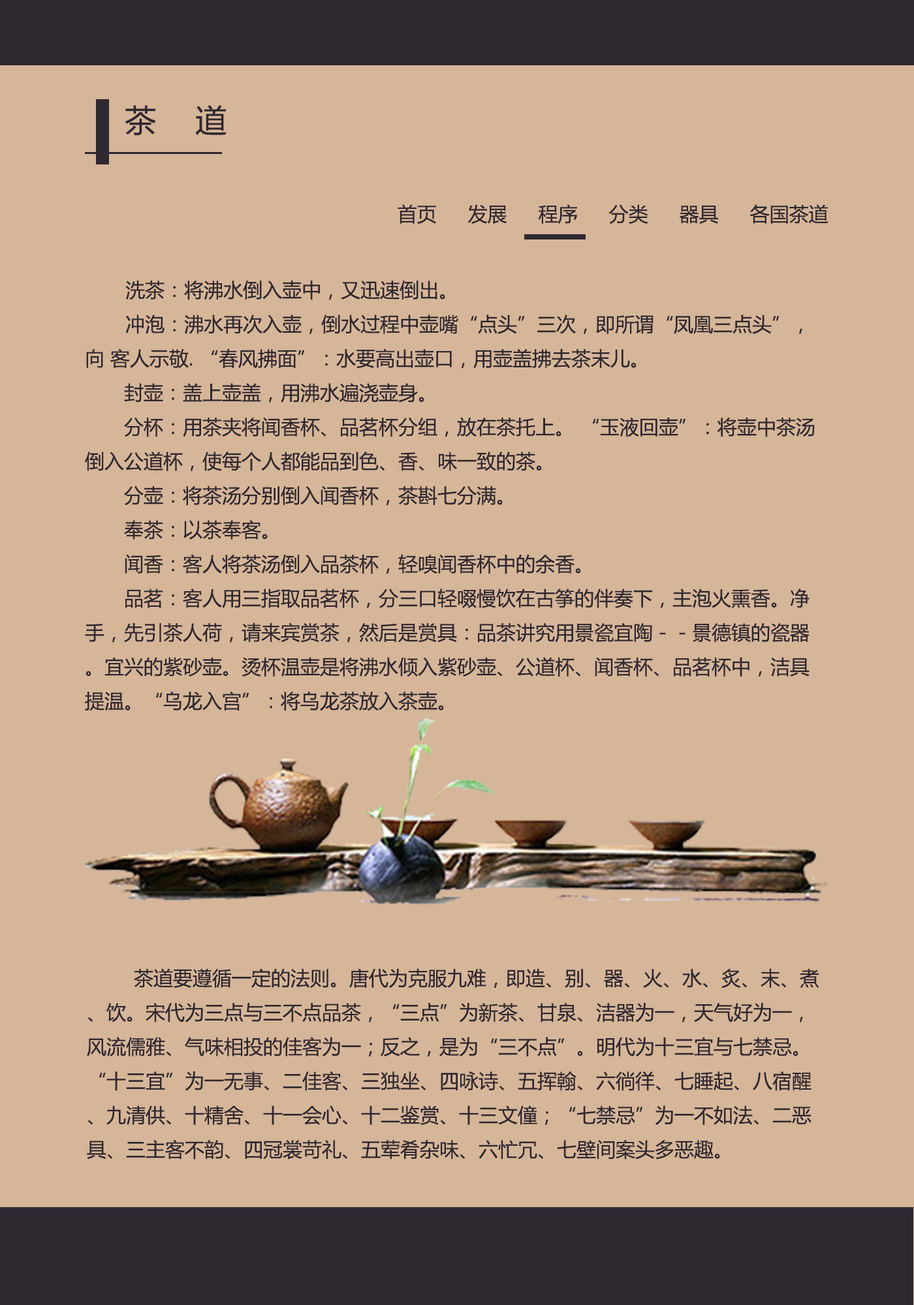
<style>
.page{position:relative;width:914px;height:1305px;background:#d6b698}
.page>*{position:absolute;margin:0}
.t1{font:31.3px "MicrosoftYaHei";color:#2e2831}
.t2{font:19.6px "MicrosoftYaHei";color:#2e2831}
</style>
<div class="page">
<p class="t1" style="left:125px;top:105px;width:101px;height:31px">茶  道</p>
<p class="t2" style="left:397px;top:204px;width:431px;height:20px">首页  发展   程序  分类   器具   各国茶道</p>
<p class="t2" style="left:85px;top:280px;width:729px;height:431px">洗茶：将沸水倒入壶中，又迅速倒出。<br>       冲泡：沸水再次入壶，倒水过程中壶嘴“点头”三次，即所谓“凤凰三点头”，向 客人示敬. “春风拂面”：水要高出壶口，用壶盖拂去茶末儿。<br>　　封壶：盖上壶盖，用沸水遍浇壶身。<br>　　分杯：用茶夹将闻香杯、品茗杯分组，放在茶托上。 “玉液回壶”：将壶中茶汤倒入公道杯，使每个人都能品到色、香、味一致的茶。<br>　　分壶：将茶汤分别倒入闻香杯，茶斟七分满。<br>　　奉茶：以茶奉客。<br>　　闻香：客人将茶汤倒入品茶杯，轻嗅闻香杯中的余香。<br>　　品茗：客人用三指取品茗杯，分三口轻啜慢饮在古筝的伴奏下，主泡火熏香。净手，先引茶人荷，请来宾赏茶，然后是赏具：品茶讲究用景瓷宜陶－－景德镇的瓷器。宜兴的紫砂壶。烫杯温壶是将沸水倾入紫砂壶、公道杯、闻香杯、品茗杯中，洁具提温。“乌龙入宫”：将乌龙茶放入茶壶。</p>
<p class="t2" style="left:87px;top:968px;width:732px;height:192px">茶道要遵循一定的法则。唐代为克服九难，即造、别、器、火、水、炙、末、煮、饮。宋代为三点与三不点品茶，“三点”为新茶、甘泉、洁器为一，天气好为一，风流儒雅、气味相投的佳客为一；反之，是为“三不点”。明代为十三宜与七禁忌。“十三宜”为一无事、二佳客、三独坐、四咏诗、五挥翰、六徜徉、七睡起、八宿醒、九清供、十精舍、十一会心、十二鉴赏、十三文僮；“七禁忌”为一不如法、二恶具、三主客不韵、四冠裳苛礼、五荤肴杂味、六忙冗、七壁间案头多恶趣。</p>
</div>
